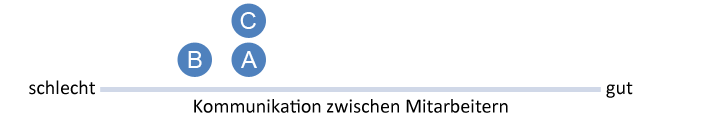
<style>
.page{position:relative;width:717px;height:120px;background:#ffffff}
.page>*{position:absolute;margin:0}
.t1{font:24px "ArialMT";color:#ffffff}
.t2{font:20px "Calibri";color:#000000}
</style>
<div class="page">
<p class="t1" style="left:240px;top:12px;width:16px;height:17px">C</p>
<p class="t1" style="left:188px;top:51px;width:14px;height:17px">B</p>
<p class="t1" style="left:241px;top:51px;width:16px;height:17px">A</p>
<p class="t2" style="left:29px;top:80px;width:66px;height:15px">schlecht</p>
<p class="t2" style="left:606px;top:82px;width:27px;height:16px">gut</p>
<p class="t2" style="left:194px;top:99px;width:314px;height:14px">Kommunikation zwischen Mitarbeitern</p>
</div>
